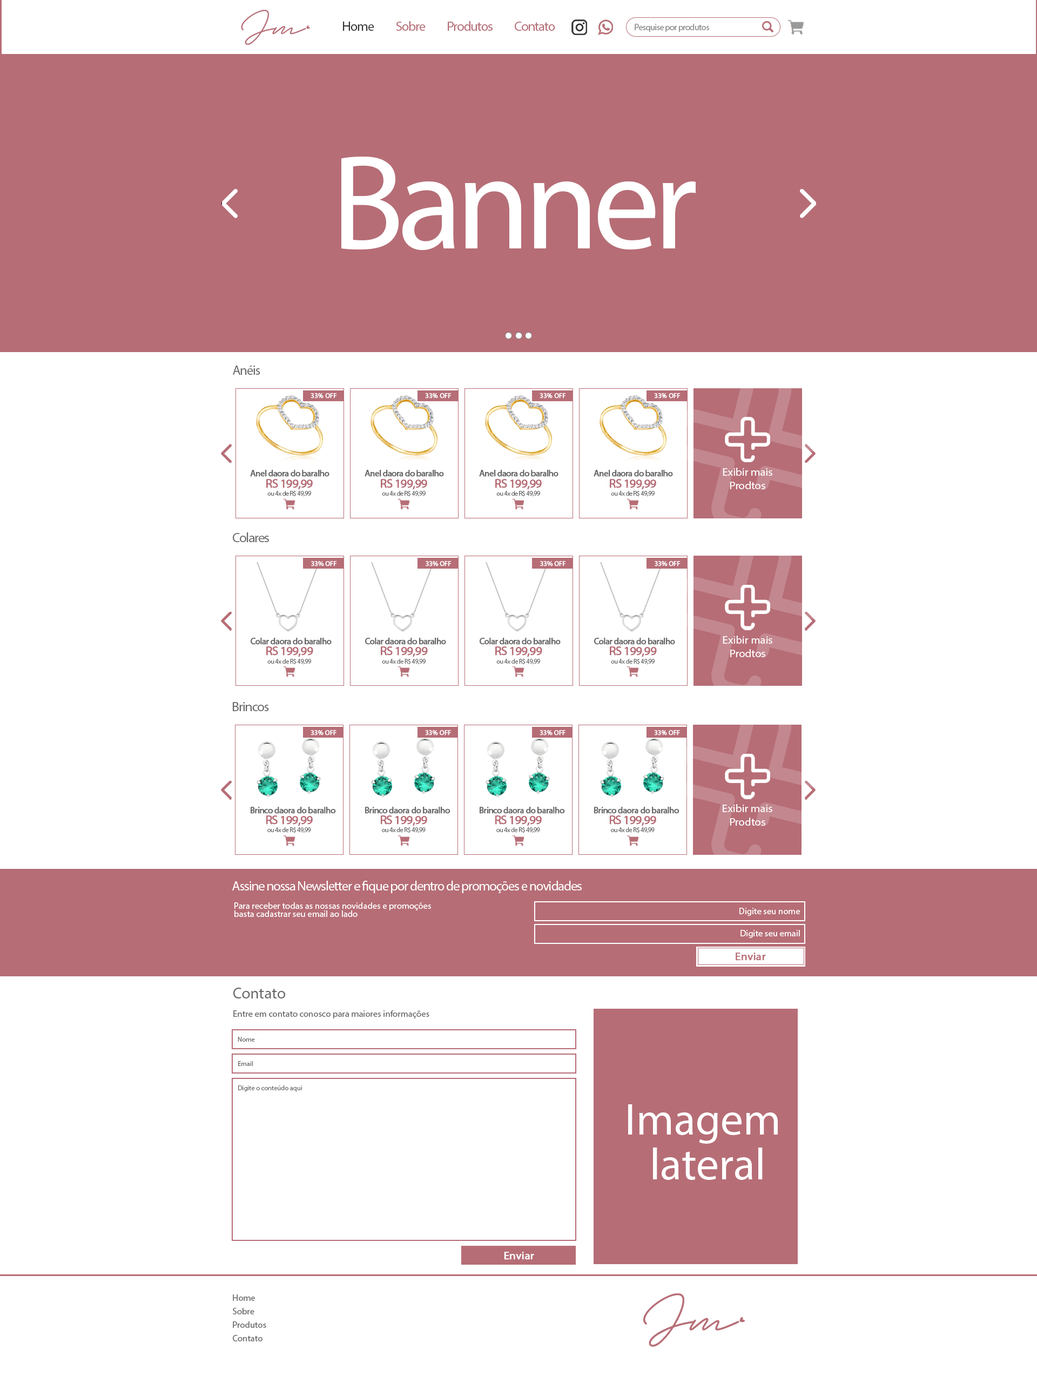
<style>
.page{position:relative;width:1037px;height:1377px;background:#ffffff}
.page>*{position:absolute;margin:0}
.t1{font:13.5px "MyriadPro-Regular";letter-spacing:-0.05em;color:#b66d76}
.t2{font:13.5px "MyriadPro-Regular";letter-spacing:-0.05em;color:#333333}
.t3{font:9px "MyriadPro-Regular";letter-spacing:-0.05em;color:#888888}
.t4{font:135px "MyriadPro-Regular";letter-spacing:-0.05em;color:#ffffff}
.t5{font:13.5px "MyriadPro-Regular";letter-spacing:-0.05em;color:#666666}
.t6{font:6.7px "MyriadPro-Regular";color:#ffffff;font-weight:bold}
.t7{font:9px "MyriadPro-Regular";letter-spacing:-0.05em;color:#666666;font-weight:bold}
.t8{font:11.2px/13.5px "MyriadPro-Regular";color:#ffffff}
.t9{font:12.4px "MyriadPro-Regular";letter-spacing:-0.05em;color:#b66d76;font-weight:bold}
.t10{font:6.7px "MyriadPro-Regular";letter-spacing:-0.05em;color:#666666}
.t11{font:13.5px "MyriadPro-Regular";letter-spacing:-0.05em;color:#ffffff}
.t12{font:9px/7.9px "MyriadPro-Regular";color:#ffffff}
.t13{font:9px "MyriadPro-Regular";color:#ffffff}
.t14{font:11.2px "MyriadPro-Regular";color:#b66d76;font-weight:bold}
.t15{font:15.7px "MyriadPro-Regular";color:#666666}
.t16{font:9px "MyriadPro-Regular";color:#666666}
.t17{font:6.7px "MyriadPro-Regular";color:#666666}
.t18{font:11.2px "MyriadPro-Regular";color:#ffffff;font-weight:bold}
.t19{font:9px/13.5px "MyriadPro-Regular";color:#666666}
</style>
<div class="page">
<p class="t1" style="left:343px;top:21px;width:212px;height:10px"><span class="t2">Home          </span>Sobre          Produtos          Contato</p>
<p class="t3" style="left:634px;top:24px;width:75px;height:8px">Pesquise por produtos</p>
<p class="t4" style="left:341px;top:157px;width:355px;height:93px">Banner</p>
<p class="t5" style="left:233px;top:365px;width:27px;height:10px">Anéis</p>
<p class="t6" style="left:310px;top:393px;width:27px;height:6px">33% OFF</p>
<p class="t6" style="left:425px;top:393px;width:26px;height:6px">33% OFF</p>
<p class="t6" style="left:539px;top:393px;width:27px;height:6px">33% OFF</p>
<p class="t6" style="left:654px;top:393px;width:26px;height:6px">33% OFF</p>
<p class="t7" style="left:250px;top:470px;width:79px;height:7px">Anel daora do baralho</p>
<p class="t7" style="left:364px;top:470px;width:80px;height:7px">Anel daora do baralho</p>
<p class="t7" style="left:479px;top:470px;width:79px;height:7px">Anel daora do baralho</p>
<p class="t7" style="left:593px;top:470px;width:80px;height:7px">Anel daora do baralho</p>
<p class="t8" style="left:723px;top:468px;width:49px;height:21px;text-align:center">Exibir mais<br>Prodtos</p>
<p class="t9" style="left:266px;top:479px;width:47px;height:11px">RS 199,99</p>
<p class="t9" style="left:381px;top:479px;width:46px;height:11px">RS 199,99</p>
<p class="t9" style="left:495px;top:479px;width:47px;height:11px">RS 199,99</p>
<p class="t9" style="left:610px;top:479px;width:46px;height:11px">RS 199,99</p>
<p class="t10" style="left:267px;top:490px;width:44px;height:7px">ou 4x de R$ 49,99</p>
<p class="t10" style="left:382px;top:490px;width:44px;height:7px">ou 4x de R$ 49,99</p>
<p class="t10" style="left:496px;top:490px;width:44px;height:7px">ou 4x de R$ 49,99</p>
<p class="t10" style="left:611px;top:490px;width:43px;height:7px">ou 4x de R$ 49,99</p>
<p class="t5" style="left:233px;top:532px;width:36px;height:10px">Colares</p>
<p class="t6" style="left:311px;top:561px;width:26px;height:5px">33% OFF</p>
<p class="t6" style="left:426px;top:561px;width:25px;height:5px">33% OFF</p>
<p class="t6" style="left:540px;top:561px;width:26px;height:5px">33% OFF</p>
<p class="t6" style="left:654px;top:561px;width:26px;height:5px">33% OFF</p>
<p class="t7" style="left:251px;top:638px;width:81px;height:7px">Colar daora do baralho</p>
<p class="t7" style="left:365px;top:638px;width:81px;height:7px">Colar daora do baralho</p>
<p class="t7" style="left:480px;top:638px;width:81px;height:7px">Colar daora do baralho</p>
<p class="t7" style="left:594px;top:638px;width:81px;height:7px">Colar daora do baralho</p>
<p class="t8" style="left:723px;top:636px;width:49px;height:21px;text-align:center">Exibir mais<br>Prodtos</p>
<p class="t9" style="left:266px;top:646px;width:47px;height:11px">RS 199,99</p>
<p class="t9" style="left:381px;top:646px;width:47px;height:11px">RS 199,99</p>
<p class="t9" style="left:495px;top:646px;width:47px;height:11px">RS 199,99</p>
<p class="t9" style="left:610px;top:646px;width:47px;height:11px">RS 199,99</p>
<p class="t10" style="left:267px;top:658px;width:44px;height:7px">ou 4x de R$ 49,99</p>
<p class="t10" style="left:382px;top:658px;width:44px;height:7px">ou 4x de R$ 49,99</p>
<p class="t10" style="left:496px;top:658px;width:44px;height:7px">ou 4x de R$ 49,99</p>
<p class="t10" style="left:611px;top:658px;width:43px;height:7px">ou 4x de R$ 49,99</p>
<p class="t5" style="left:233px;top:702px;width:36px;height:9px">Brincos</p>
<p class="t6" style="left:310px;top:730px;width:26px;height:5px">33% OFF</p>
<p class="t6" style="left:425px;top:730px;width:26px;height:5px">33% OFF</p>
<p class="t6" style="left:539px;top:730px;width:26px;height:5px">33% OFF</p>
<p class="t6" style="left:654px;top:730px;width:26px;height:5px">33% OFF</p>
<p class="t7" style="left:251px;top:807px;width:85px;height:7px">Brinco daora do baralho</p>
<p class="t7" style="left:365px;top:807px;width:85px;height:7px">Brinco daora do baralho</p>
<p class="t7" style="left:480px;top:807px;width:85px;height:7px">Brinco daora do baralho</p>
<p class="t7" style="left:594px;top:807px;width:85px;height:7px">Brinco daora do baralho</p>
<p class="t8" style="left:723px;top:804px;width:49px;height:22px;text-align:center">Exibir mais<br>Prodtos</p>
<p class="t9" style="left:266px;top:815px;width:47px;height:11px">RS 199,99</p>
<p class="t9" style="left:380px;top:815px;width:47px;height:11px">RS 199,99</p>
<p class="t9" style="left:495px;top:815px;width:47px;height:11px">RS 199,99</p>
<p class="t9" style="left:609px;top:815px;width:47px;height:11px">RS 199,99</p>
<p class="t10" style="left:267px;top:827px;width:44px;height:6px">ou 4x de R$ 49,99</p>
<p class="t10" style="left:382px;top:827px;width:44px;height:6px">ou 4x de R$ 49,99</p>
<p class="t10" style="left:496px;top:827px;width:44px;height:6px">ou 4x de R$ 49,99</p>
<p class="t10" style="left:611px;top:827px;width:43px;height:6px">ou 4x de R$ 49,99</p>
<p class="t11" style="left:232px;top:881px;width:350px;height:12px">Assine nossa Newsletter e fique por dentro de promoções e novidades</p>
<p class="t12" style="left:234px;top:902px;width:197px;height:15px">Para receber todas as nossas novidades e promoções <br>basta cadastrar seu email ao lado</p>
<p class="t13" style="left:739px;top:908px;width:61px;height:8px">Digite seu nome</p>
<p class="t13" style="left:740px;top:930px;width:60px;height:8px">Digite seu email</p>
<p class="t14" style="left:735px;top:953px;width:31px;height:8px">Enviar</p>
<p class="t15" style="left:233px;top:988px;width:52px;height:10px">Contato</p>
<p class="t16" style="left:233px;top:1010px;width:196px;height:8px">Entre em contato conosco para maiores informações</p>
<p class="t17" style="left:238px;top:1037px;width:17px;height:5px">Nome</p>
<p class="t17" style="left:238px;top:1061px;width:15px;height:5px">Email</p>
<p class="t17" style="left:238px;top:1085px;width:64px;height:7px">Digite o conteúdo aqui</p>
<p class="t18" style="left:504px;top:1252px;width:30px;height:8px">Enviar</p>
<p class="t19" style="left:233px;top:1294px;width:33px;height:47px">Home<br>Sobre<br>Produtos<br>Contato</p>
</div>
